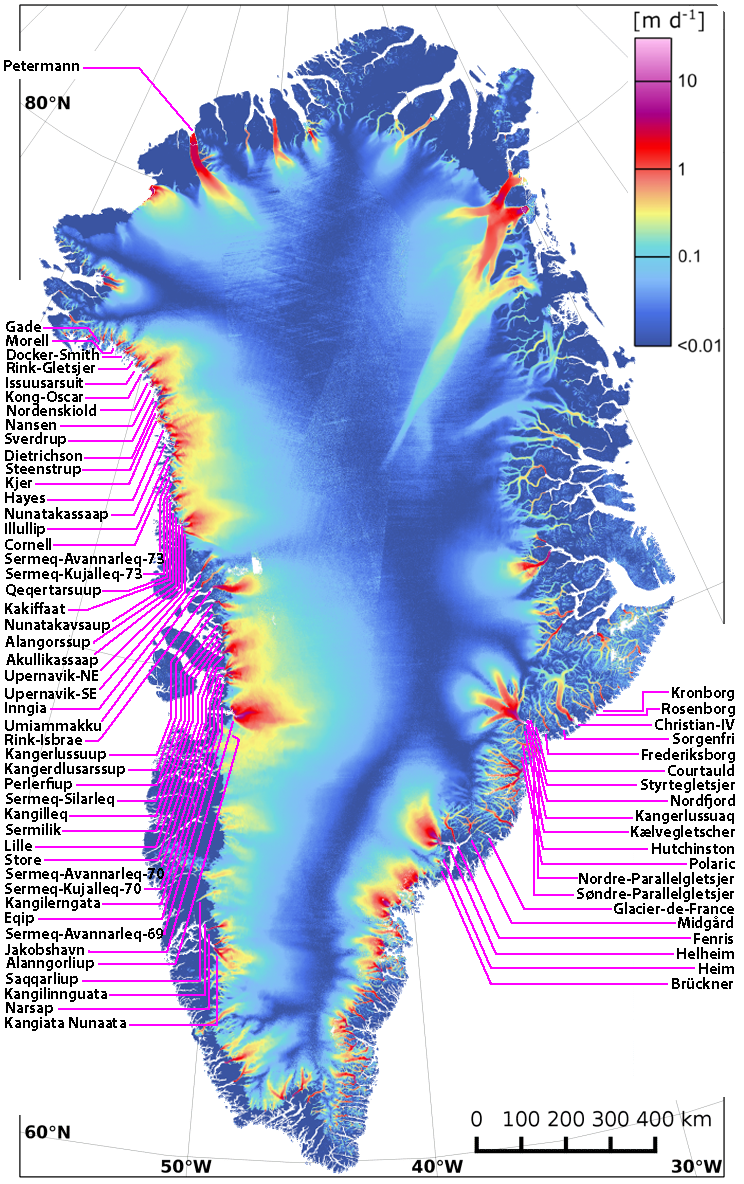
<style>
.page{position:relative;width:744px;height:1184px;background:#ffffff}
.page>*{position:absolute;margin:0}
.t1{font:16px "MyriadPro-Bold";color:#000000}
.t2{font:15.9px "MyriadPro-Bold";color:#000000}
</style>
<div class="page">
<p class="t1" style="left:4px;top:60px;width:75px;height:11px">Petermann</p>
<p class="t2" style="left:6px;top:320px;width:35px;height:12px">Gade</p>
<p class="t2" style="left:6px;top:334px;width:42px;height:12px">Morell</p>
<p class="t2" style="left:7px;top:348px;width:92px;height:12px">Docker-Smith</p>
<p class="t2" style="left:7px;top:361px;width:88px;height:15px">Rink-Gletsjer</p>
<p class="t2" style="left:6px;top:377px;width:77px;height:11px">Issuusarsuit</p>
<p class="t1" style="left:6px;top:391px;width:77px;height:14px">Kong-Oscar</p>
<p class="t1" style="left:7px;top:404px;width:89px;height:12px">Nordenskiold</p>
<p class="t1" style="left:6px;top:419px;width:50px;height:11px">Nansen</p>
<p class="t1" style="left:5px;top:432px;width:61px;height:15px">Sverdrup</p>
<p class="t1" style="left:5px;top:449px;width:77px;height:12px">Dietrichson</p>
<p class="t1" style="left:6px;top:463px;width:75px;height:14px">Steenstrup</p>
<p class="t1" style="left:6px;top:477px;width:26px;height:14px">Kjer</p>
<p class="t1" style="left:5px;top:492px;width:40px;height:14px">Hayes</p>
<p class="t1" style="left:5px;top:507px;width:103px;height:15px">Nunatakassaap</p>
<p class="t1" style="left:5px;top:522px;width:40px;height:15px">Illullip</p>
<p class="t1" style="left:5px;top:538px;width:46px;height:12px">Cornell</p>
<p class="t1" style="left:5px;top:552px;width:159px;height:15px">Sermeq-Avannarleq-73</p>
<p class="t1" style="left:6px;top:567px;width:136px;height:15px">Sermeq-Kujalleq-73</p>
<p class="t1" style="left:6px;top:584px;width:95px;height:14px">Qeqertarsuup</p>
<p class="t1" style="left:5px;top:602px;width:60px;height:12px">Kakiffaat</p>
<p class="t1" style="left:5px;top:618px;width:105px;height:15px">Nunatakavsaup</p>
<p class="t1" style="left:5px;top:635px;width:85px;height:15px">Alangorssup</p>
<p class="t1" style="left:6px;top:653px;width:92px;height:15px">Akullikassaap</p>
<p class="t1" style="left:5px;top:669px;width:93px;height:15px">Upernavik-NE</p>
<p class="t1" style="left:5px;top:687px;width:91px;height:15px">Upernavik-SE</p>
<p class="t1" style="left:672px;top:686px;width:62px;height:15px">Kronborg</p>
<p class="t1" style="left:5px;top:702px;width:41px;height:14px">Inngia</p>
<p class="t1" style="left:662px;top:702px;width:73px;height:15px">Rosenborg</p>
<p class="t1" style="left:5px;top:719px;width:96px;height:12px">Umiammakku</p>
<p class="t1" style="left:655px;top:718px;width:80px;height:12px">Christian-IV</p>
<p class="t1" style="left:5px;top:733px;width:77px;height:12px">Rink-Isbrae</p>
<p class="t1" style="left:673px;top:732px;width:61px;height:15px">Sorgenfri</p>
<p class="t1" style="left:6px;top:747px;width:100px;height:15px">Kangerlussuup</p>
<p class="t1" style="left:642px;top:748px;width:93px;height:15px">Frederiksborg</p>
<p class="t1" style="left:5px;top:762px;width:120px;height:15px">Kangerdlusarssup</p>
<p class="t1" style="left:668px;top:764px;width:66px;height:12px">Courtauld</p>
<p class="t1" style="left:5px;top:777px;width:67px;height:15px">Perlerfiup</p>
<p class="t1" style="left:641px;top:778px;width:94px;height:15px">Styrtegletsjer</p>
<p class="t1" style="left:6px;top:792px;width:108px;height:15px">Sermeq-Silarleq</p>
<p class="t1" style="left:671px;top:794px;width:64px;height:15px">Nordfjord</p>
<p class="t1" style="left:5px;top:807px;width:62px;height:15px">Kangilleq</p>
<p class="t1" style="left:636px;top:809px;width:98px;height:15px">Kangerlussuaq</p>
<p class="t1" style="left:6px;top:823px;width:55px;height:12px">Sermilik</p>
<p class="t1" style="left:631px;top:825px;width:104px;height:15px">Kælvegletscher</p>
<p class="t1" style="left:5px;top:839px;width:27px;height:12px">Lille</p>
<p class="t1" style="left:652px;top:842px;width:82px;height:12px">Hutchinston</p>
<p class="t1" style="left:5px;top:854px;width:36px;height:11px">Store</p>
<p class="t1" style="left:690px;top:857px;width:45px;height:12px">Polaric</p>
<p class="t1" style="left:6px;top:867px;width:158px;height:15px">Sermeq-Avannarleq-70</p>
<p class="t1" style="left:579px;top:872px;width:155px;height:15px">Nordre-Parallelgletsjer</p>
<p class="t1" style="left:5px;top:882px;width:136px;height:15px">Sermeq-Kujalleq-70</p>
<p class="t1" style="left:577px;top:887px;width:157px;height:15px">Søndre-Parallelgletsjer</p>
<p class="t1" style="left:6px;top:896px;width:94px;height:15px">Kangilerngata</p>
<p class="t1" style="left:614px;top:902px;width:120px;height:12px">Glacier-de-France</p>
<p class="t1" style="left:5px;top:912px;width:29px;height:14px">Eqip</p>
<p class="t1" style="left:678px;top:916px;width:55px;height:15px">Midgård</p>
<p class="t1" style="left:6px;top:927px;width:157px;height:15px">Sermeq-Avannarleq-69</p>
<p class="t1" style="left:694px;top:933px;width:39px;height:11px">Fenris</p>
<p class="t1" style="left:5px;top:943px;width:79px;height:12px">Jakobshavn</p>
<p class="t1" style="left:677px;top:947px;width:57px;height:12px">Helheim</p>
<p class="t1" style="left:6px;top:956px;width:88px;height:15px">Alanngorliup</p>
<p class="t1" style="left:699px;top:963px;width:35px;height:11px">Heim</p>
<p class="t1" style="left:6px;top:972px;width:72px;height:15px">Saqqarliup</p>
<p class="t1" style="left:672px;top:977px;width:61px;height:12px">Brückner</p>
<p class="t1" style="left:5px;top:987px;width:102px;height:15px">Kangilinnguata</p>
<p class="t1" style="left:6px;top:1002px;width:47px;height:14px">Narsap</p>
<p class="t1" style="left:5px;top:1017px;width:121px;height:14px">Kangiata Nunaata</p>
</div>
